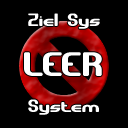
<style>
.page{position:relative;width:128px;height:128px;background:#000000}
.page>*{position:absolute;margin:0}
.t1{font:18px "GravitateBRK";color:#ffffff}
.t2{font:34px "GravitateBRK";color:#ffffff}
</style>
<div class="page">
<p class="t1" style="left:28px;top:13px;width:72px;height:16px">Ziel Sys</p>
<p class="t2" style="left:24px;top:52px;width:78px;height:24px">LEER</p>
<p class="t1" style="left:28px;top:99px;width:71px;height:16px">System</p>
</div>
